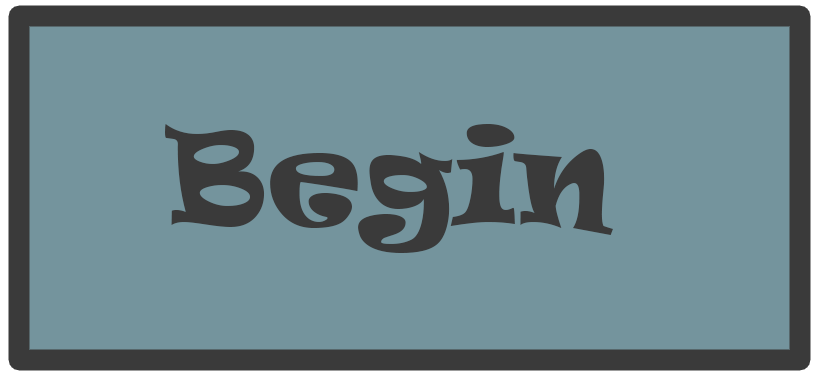
<style>
.page{position:relative;width:817px;height:379px;background:#74949d}
.page>*{position:absolute;margin:0}
.t1{font:125px "Ravie";color:#3a3a3a}
</style>
<div class="page">
<p class="t1" style="left:165px;top:124px;width:448px;height:129px">Begin</p>
</div>
